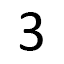
<style>
.page{position:relative;width:64px;height:64px;background:#ffffff}
.page>*{position:absolute;margin:0}
.t1{font:58.3px "Calibri";color:#000000}
</style>
<div class="page">
<p class="t1" style="left:19px;top:12px;width:24px;height:39px">3</p>
</div>
